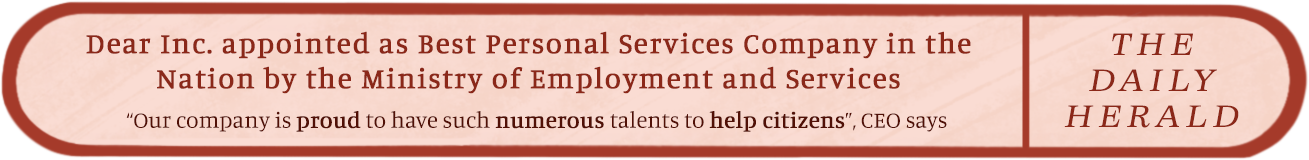
<style>
.page{position:relative;width:1309px;height:160px}
.page>*{position:absolute;margin:0}
.t1{font:29px "Manuale-Regular";letter-spacing:0.04em;color:#8b2819;font-weight:bold}
.t2{font:30px "Zeit-Light";letter-spacing:0.16em;color:#8b2819;font-weight:bold;font-style:italic}
.t3{font:23px "Manuale-Regular";color:#511006}
.t4{font:23px "Manuale-Regular";color:#511006;font-weight:bold}
</style>
<div class="page">
<p class="t1" style="left:86px;top:31px;width:885px;height:63px;text-align:center">Dear Inc. appointed as Best Personal Services Company in the Nation by the Ministry of Employment and Services</p>
<p class="t2" style="left:1064px;top:33px;width:175px;height:95px;text-align:center">THE DAILY<br>HERALD</p>
<p class="t3" style="left:126px;top:111px;width:821px;height:21px">“Our company is <span class="t4">proud</span> to have such <span class="t4">numerous </span>talents to <span class="t4">help citizens</span>”, CEO says</p>
</div>
